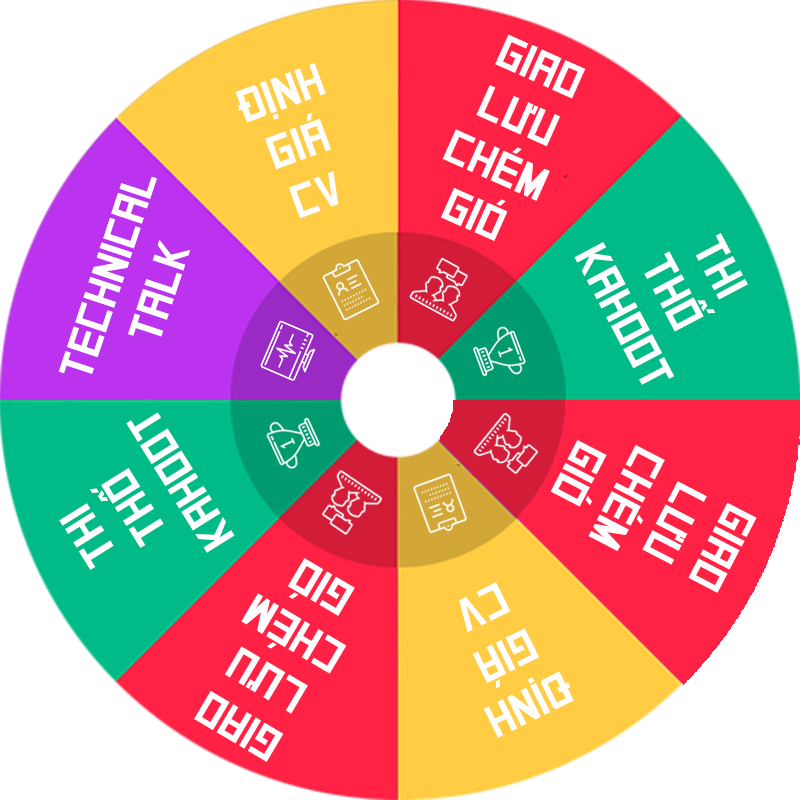
<style>
.page{position:relative;width:800px;height:800px;background:#ffffff}
.page>*{position:absolute;margin:0}
.t1{font:46.4px "SVN-Square";color:#ffffff;text-transform:uppercase}
</style>
<div class="page">
<p class="t1" style="left:441px;top:34px;width:145px;height:207px;rotate:24deg">GIAO LƯU CHÉM GIÓ</p>
<p class="t1" style="left:235px;top:63px;width:104px;height:156px;text-align:center;rotate:-20deg">ĐỊNH <br>GIÁ <br>CV</p>
<p class="t1" style="left:58px;top:176px;width:133px;height:198px;rotate:-72deg">TECHNICAL TALK</p>
<p class="t1" style="left:574px;top:233px;width:174px;height:152px;text-align:center;rotate:62deg">THI <br>THỐ KAHOOT</p>
<p class="t1" style="left:59px;top:412px;width:176px;height:158px;text-align:center;rotate:-122deg">THI <br>THỐ KAHOOT</p>
<p class="t1" style="left:550px;top:440px;width:207px;height:153px;rotate:117deg">GIAO LƯU CHÉM GIÓ</p>
<p class="t1" style="left:194px;top:558px;width:161px;height:204px;rotate:-149deg">GIAO LƯU CHÉM GIÓ</p>
<p class="t1" style="left:459px;top:582px;width:115px;height:156px;text-align:center;rotate:154deg">ĐỊNH <br>GIÁ <br>CV</p>
</div>
